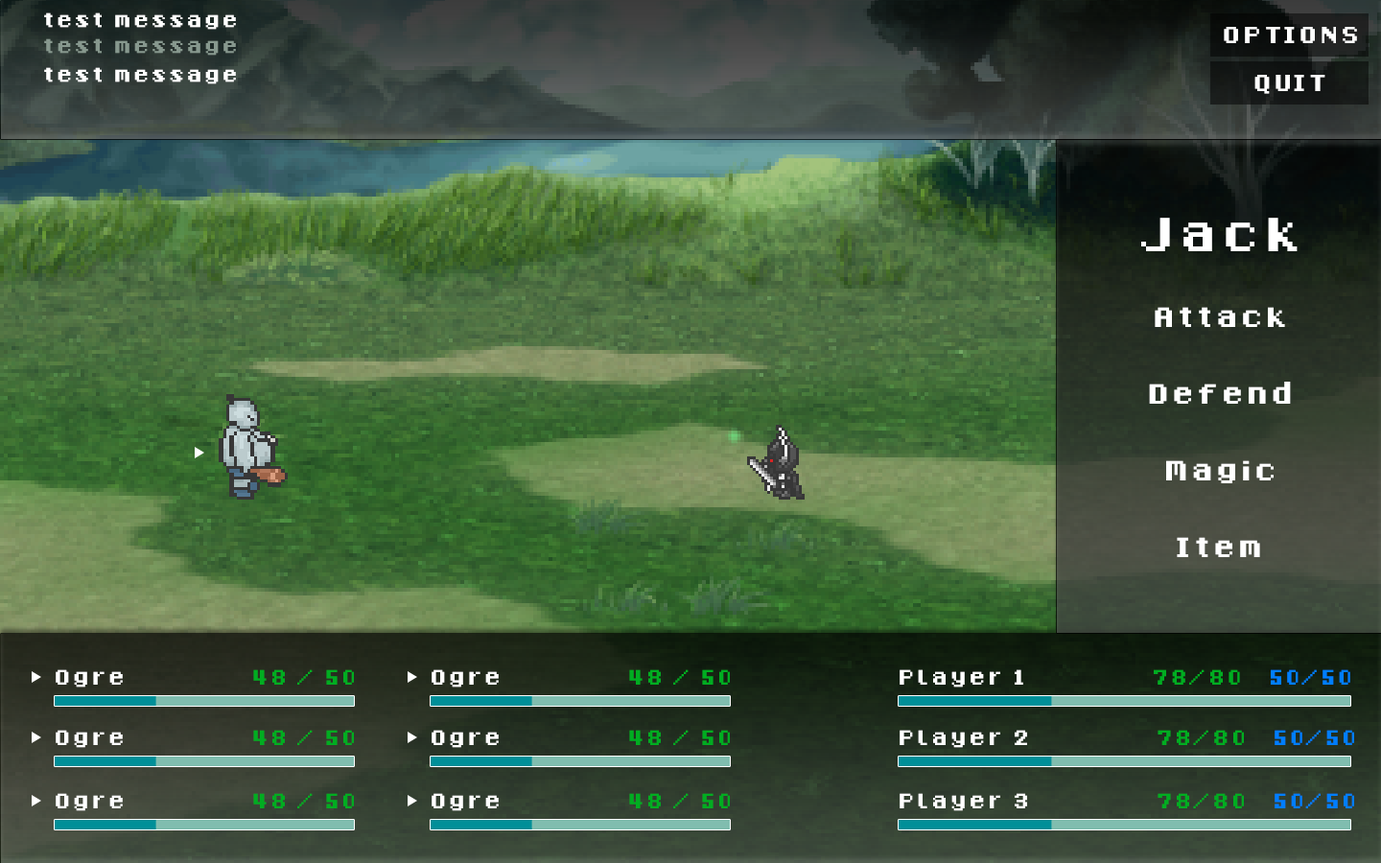
<style>
.page{position:relative;width:1381px;height:863px}
.page>*{position:absolute;margin:0}
.t1{font:31.7px "8-Bit-Madness";letter-spacing:0.06em;color:#ffffff}
.t2{font:37.4px "8-Bit-Madness";letter-spacing:0.06em;color:#ffffff}
.t3{font:31.7px "8-Bit-Madness";letter-spacing:0.06em;color:#87988e}
.t4{font:76.2px "8-Bit-Madness";letter-spacing:0.06em;color:#ffffff}
.t5{font:44.1px/76.7px "8-Bit-Madness";letter-spacing:0.06em;color:#ffffff}
.t6{font:33.6px "8-Bit-Madness";letter-spacing:0.06em;color:#00ad21}
.t7{font:33.6px "8-Bit-Madness";letter-spacing:0.06em;color:#ffffff}
.t8{font:33.6px "8-Bit-Madness";letter-spacing:0.06em;color:#007eff}
</style>
<div class="page">
<p class="t1" style="left:44px;top:12px;width:192px;height:18px">test message</p>
<p class="t2" style="left:1224px;top:27px;width:133px;height:16px">OPTIONS</p>
<p class="t3" style="left:44px;top:38px;width:192px;height:18px">test message</p>
<p class="t1" style="left:44px;top:67px;width:192px;height:17px">test message</p>
<p class="t2" style="left:1255px;top:75px;width:71px;height:19px">QUIT</p>
<p class="t4" style="left:1141px;top:218px;width:157px;height:33px">Jack</p>
<p class="t5" style="left:1149px;top:307px;width:142px;height:250px;text-align:center">Attack<br>Defend<br>Magic<br>Item</p>
<p class="t6" style="left:56px;top:670px;width:298px;height:18px"><span class="t7">Ogre               </span>48 / 50</p>
<p class="t6" style="left:432px;top:670px;width:298px;height:18px"><span class="t7">Ogre               </span>48 / 50</p>
<p class="t7" style="left:900px;top:670px;width:451px;height:18px">Player 1               <span class="t6">78/80   </span><span class="t8">50/50</span></p>
<p class="t6" style="left:56px;top:730px;width:298px;height:18px"><span class="t7">Ogre               </span>48 / 50</p>
<p class="t6" style="left:432px;top:730px;width:298px;height:18px"><span class="t7">Ogre               </span>48 / 50</p>
<p class="t7" style="left:900px;top:730px;width:454px;height:18px">Player 2               <span class="t6">78/80   </span><span class="t8">50/50</span></p>
<p class="t6" style="left:56px;top:793px;width:298px;height:18px"><span class="t7">Ogre               </span>48 / 50</p>
<p class="t6" style="left:432px;top:793px;width:298px;height:18px"><span class="t7">Ogre               </span>48 / 50</p>
<p class="t7" style="left:900px;top:793px;width:454px;height:18px">Player 3               <span class="t6">78/80   </span><span class="t8">50/50</span></p>
</div>
